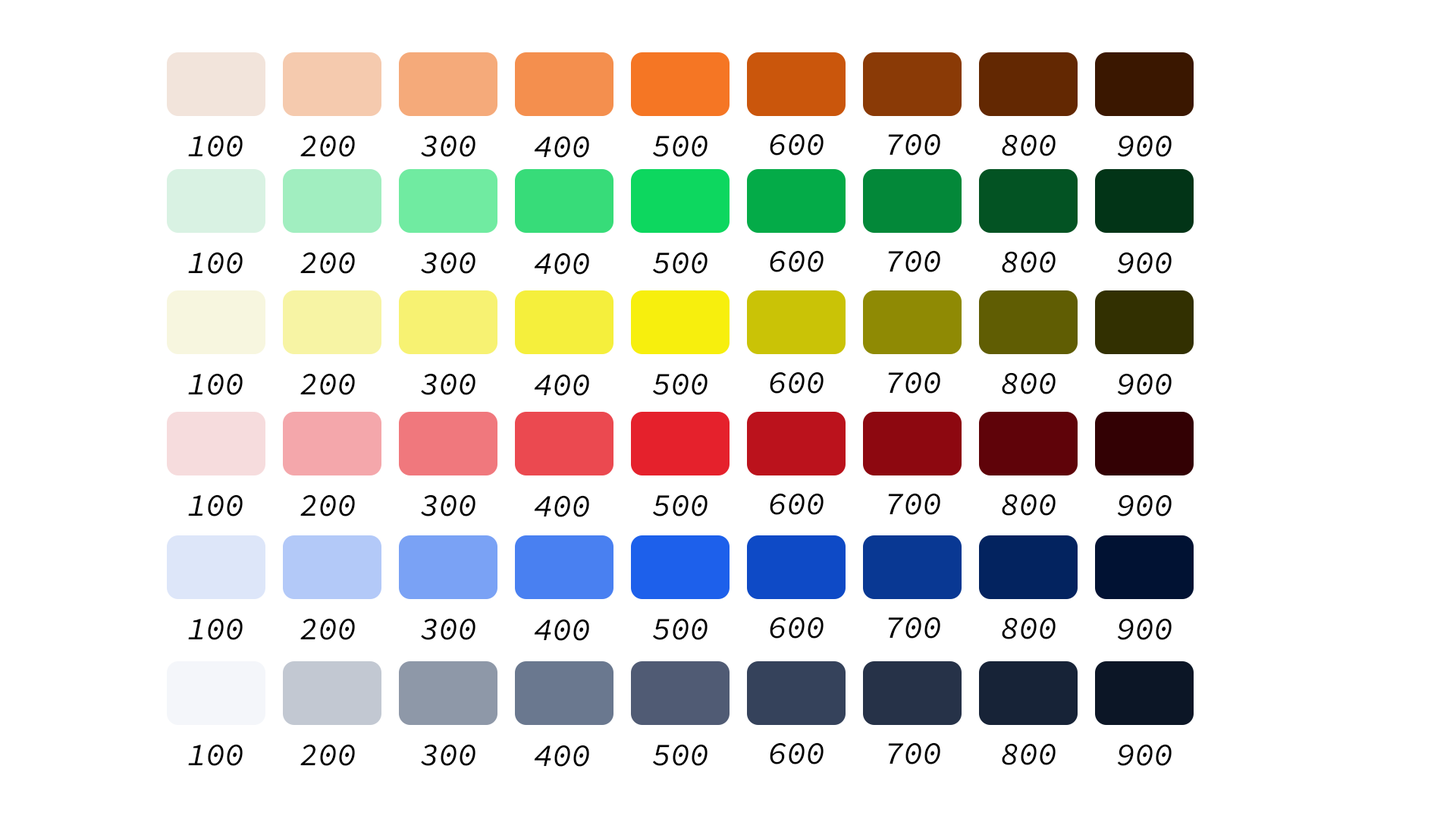
<style>
.page{position:relative;width:1456px;height:819px;background:#ffffff}
.page>*{position:absolute;margin:0}
.t1{font:31.6px "SourceCodePro-Regular";color:#000000}
</style>
<div class="page">
<p class="t1" style="left:188px;top:135px;width:55px;height:22px">100</p>
<p class="t1" style="left:300px;top:135px;width:55px;height:22px">200</p>
<p class="t1" style="left:421px;top:135px;width:54px;height:22px">300</p>
<p class="t1" style="left:534px;top:136px;width:55px;height:22px">400</p>
<p class="t1" style="left:653px;top:135px;width:55px;height:22px">500</p>
<p class="t1" style="left:770px;top:133px;width:54px;height:22px">600</p>
<p class="t1" style="left:888px;top:133px;width:52px;height:22px">700</p>
<p class="t1" style="left:1002px;top:134px;width:54px;height:22px">800</p>
<p class="t1" style="left:1117px;top:135px;width:55px;height:22px">900</p>
<p class="t1" style="left:188px;top:252px;width:55px;height:22px">100</p>
<p class="t1" style="left:300px;top:252px;width:55px;height:22px">200</p>
<p class="t1" style="left:421px;top:252px;width:54px;height:22px">300</p>
<p class="t1" style="left:534px;top:253px;width:55px;height:22px">400</p>
<p class="t1" style="left:653px;top:252px;width:55px;height:22px">500</p>
<p class="t1" style="left:770px;top:250px;width:54px;height:22px">600</p>
<p class="t1" style="left:888px;top:250px;width:52px;height:22px">700</p>
<p class="t1" style="left:1002px;top:251px;width:54px;height:22px">800</p>
<p class="t1" style="left:1117px;top:252px;width:55px;height:22px">900</p>
<p class="t1" style="left:188px;top:373px;width:55px;height:22px">100</p>
<p class="t1" style="left:300px;top:373px;width:55px;height:22px">200</p>
<p class="t1" style="left:421px;top:373px;width:54px;height:22px">300</p>
<p class="t1" style="left:534px;top:374px;width:55px;height:22px">400</p>
<p class="t1" style="left:653px;top:373px;width:55px;height:22px">500</p>
<p class="t1" style="left:770px;top:372px;width:54px;height:22px">600</p>
<p class="t1" style="left:888px;top:372px;width:52px;height:22px">700</p>
<p class="t1" style="left:1002px;top:372px;width:54px;height:22px">800</p>
<p class="t1" style="left:1117px;top:373px;width:55px;height:22px">900</p>
<p class="t1" style="left:188px;top:494px;width:55px;height:22px">100</p>
<p class="t1" style="left:300px;top:494px;width:55px;height:22px">200</p>
<p class="t1" style="left:421px;top:494px;width:54px;height:22px">300</p>
<p class="t1" style="left:534px;top:495px;width:55px;height:22px">400</p>
<p class="t1" style="left:653px;top:494px;width:55px;height:22px">500</p>
<p class="t1" style="left:770px;top:493px;width:54px;height:22px">600</p>
<p class="t1" style="left:888px;top:493px;width:52px;height:22px">700</p>
<p class="t1" style="left:1002px;top:494px;width:54px;height:22px">800</p>
<p class="t1" style="left:1117px;top:494px;width:55px;height:22px">900</p>
<p class="t1" style="left:770px;top:617px;width:54px;height:22px">600</p>
<p class="t1" style="left:888px;top:617px;width:52px;height:22px">700</p>
<p class="t1" style="left:1002px;top:617px;width:54px;height:22px">800</p>
<p class="t1" style="left:188px;top:618px;width:55px;height:22px">100</p>
<p class="t1" style="left:300px;top:618px;width:55px;height:22px">200</p>
<p class="t1" style="left:421px;top:618px;width:54px;height:22px">300</p>
<p class="t1" style="left:534px;top:619px;width:55px;height:22px">400</p>
<p class="t1" style="left:653px;top:618px;width:55px;height:22px">500</p>
<p class="t1" style="left:1117px;top:618px;width:55px;height:22px">900</p>
<p class="t1" style="left:188px;top:744px;width:55px;height:22px">100</p>
<p class="t1" style="left:300px;top:744px;width:55px;height:22px">200</p>
<p class="t1" style="left:421px;top:744px;width:54px;height:22px">300</p>
<p class="t1" style="left:534px;top:745px;width:55px;height:22px">400</p>
<p class="t1" style="left:653px;top:744px;width:55px;height:22px">500</p>
<p class="t1" style="left:770px;top:742px;width:54px;height:22px">600</p>
<p class="t1" style="left:888px;top:742px;width:52px;height:22px">700</p>
<p class="t1" style="left:1002px;top:743px;width:54px;height:22px">800</p>
<p class="t1" style="left:1117px;top:744px;width:55px;height:22px">900</p>
</div>
